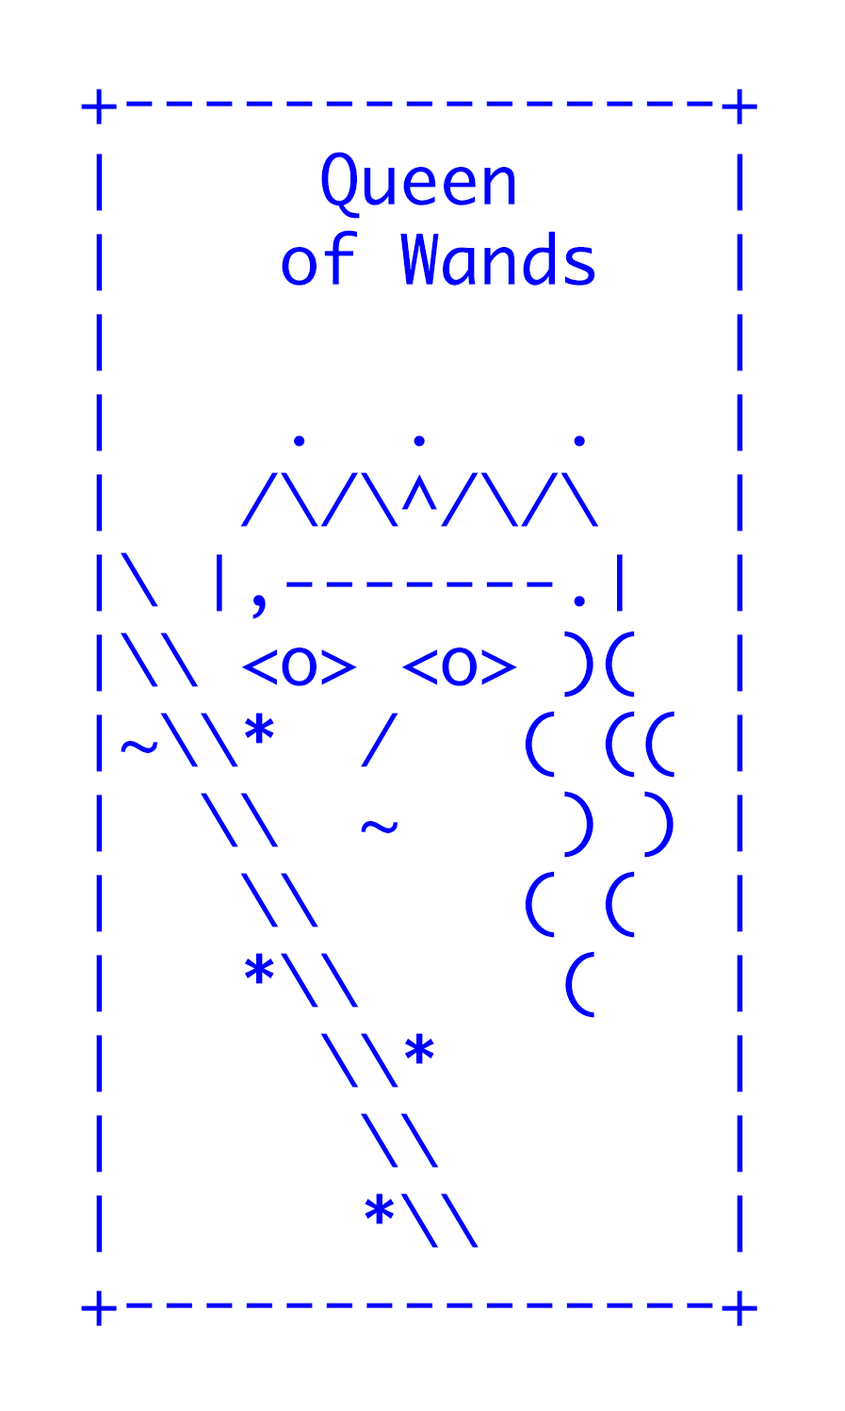
<style>
.page{position:relative;width:845px;height:1411px;background:#ffffff}
.page>*{position:absolute;margin:0}
.t1{font:66.7px "Monaco";color:#0000ff}
</style>
<div class="page">
<p class="t1" style="left:81px;top:89px;width:677px;height:1237px">+---------------+<br>│     Queen     │<br>│    of Wands   │<br>│               │<br>│    .  .   .   │<br>│   /\/\^/\/\   │<br>│\ │,-------.│  │<br>│\\ &lt;o&gt; &lt;o&gt; )(  │ <br>│~\\*  /   ( (( │ <br>│  \\  ~    ) ) │<br>│   \\     ( (  │ <br>│   *\\     (   │<br>│     \\*       │<br>│      \\       │<br>│      *\\      │<br>+---------------+</p>
</div>
